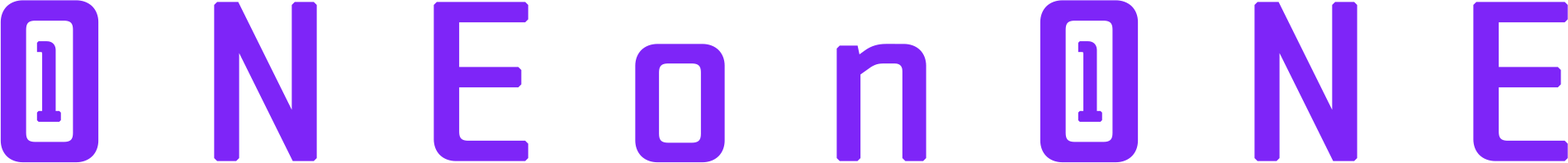
<style>
.page{position:relative;width:1568px;height:163px;background:#ffffff}
.page>*{position:absolute;margin:0}
.t1{font:219px "Tabia-Medium";letter-spacing:0.4em;color:#7e25f8;font-weight:bold}
</style>
<div class="page">
<p class="t1" style="left:0px;top:0px;width:1568px;height:163px">ONEonONE</p>
</div>
